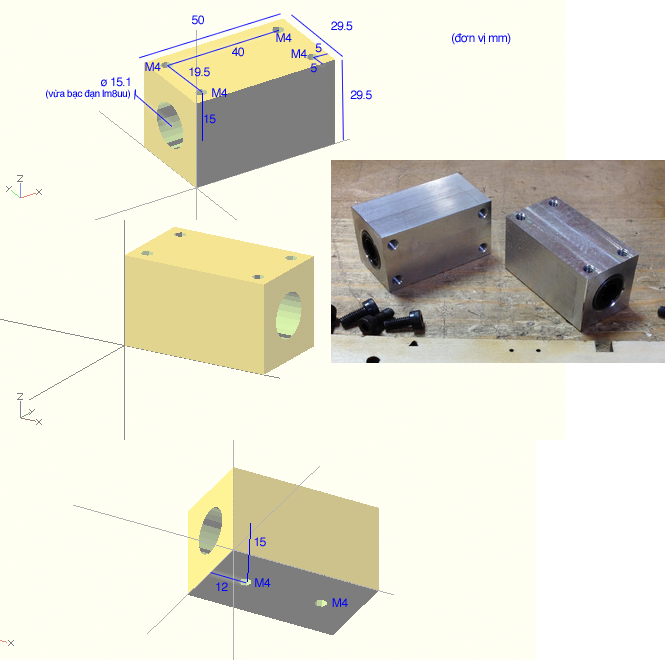
<style>
.page{position:relative;width:665px;height:660px;background:#fffef2}
.page>*{position:absolute;margin:0}
.t1{font:12px "Helvetica";letter-spacing:-0.04em;color:#0000ff}
.t2{font:10px "Helvetica";letter-spacing:-0.04em;color:#0000ff}
</style>
<div class="page">
<p class="t1" style="left:192px;top:15px;width:12px;height:10px">50</p>
<p class="t1" style="left:331px;top:21px;width:22px;height:10px">29.5</p>
<p class="t1" style="left:276px;top:33px;width:16px;height:9px">M4</p>
<p class="t1" style="left:452px;top:33px;width:59px;height:12px">(đơn vị mm)</p>
<p class="t1" style="left:232px;top:47px;width:12px;height:10px">40</p>
<p class="t1" style="left:291px;top:49px;width:16px;height:9px">M4</p>
<p class="t1" style="left:315px;top:43px;width:7px;height:10px">5</p>
<p class="t1" style="left:145px;top:62px;width:16px;height:9px">M4</p>
<p class="t1" style="left:311px;top:63px;width:6px;height:10px">5</p>
<p class="t1" style="left:101px;top:77px;width:29px;height:10px">ø 15.1</p>
<p class="t1" style="left:189px;top:67px;width:21px;height:10px">19.5</p>
<p class="t2" style="left:46px;top:89px;width:84px;height:10px">(vừa bạc đạn lm8uu)</p>
<p class="t1" style="left:212px;top:88px;width:16px;height:9px">M4</p>
<p class="t1" style="left:350px;top:90px;width:22px;height:10px">29.5</p>
<p class="t1" style="left:204px;top:114px;width:12px;height:10px">15</p>
<p class="t1" style="left:254px;top:537px;width:12px;height:10px">15</p>
<p class="t1" style="left:216px;top:582px;width:12px;height:9px">12</p>
<p class="t1" style="left:255px;top:578px;width:16px;height:9px">M4</p>
<p class="t1" style="left:332px;top:598px;width:16px;height:9px">M4</p>
</div>
